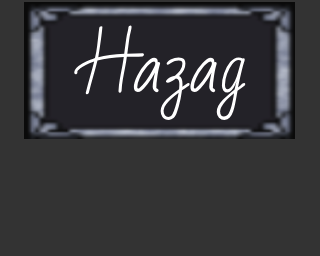
<style>
.page{position:relative;width:320px;height:256px;background:#333333}
.page>*{position:absolute;margin:0}
.t1{font:68px "BadScript-Regular";color:#ffffff}
</style>
<div class="page">
<p class="t1" style="left:74px;top:25px;width:172px;height:95px">Назад</p>
</div>
